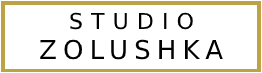
<style>
.page{position:relative;width:262px;height:73px;background:#ffffff}
.page>*{position:absolute;margin:0}
.t1{font:22px "DejaVuSans";letter-spacing:0.37em;color:#000000}
.t2{font:26px "DejaVuSans";letter-spacing:0.237em;color:#000000}
</style>
<div class="page">
<p class="t1" style="left:70px;top:12px;width:123px;height:18px">STUDIO</p>
<p class="t2" style="left:40px;top:39px;width:183px;height:21px">ZOLUSHKA</p>
</div>
